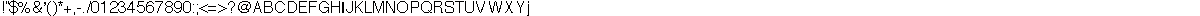
<style>
.page{position:relative;width:1200px;height:16px;background:#ffffff}
.page>*{position:absolute;margin:0}
.t1{font:16px "Helvetica";letter-spacing:0.01em;color:#010000}
</style>
<div class="page">
<p class="t1" style="left:3px;top:0px;width:526px;height:16px">!”$%&amp;’()*+,-./01234567890:;&lt;=&gt;?@ABCDEFGHIJKLMNOPQRSTUVWXYj</p>
</div>
